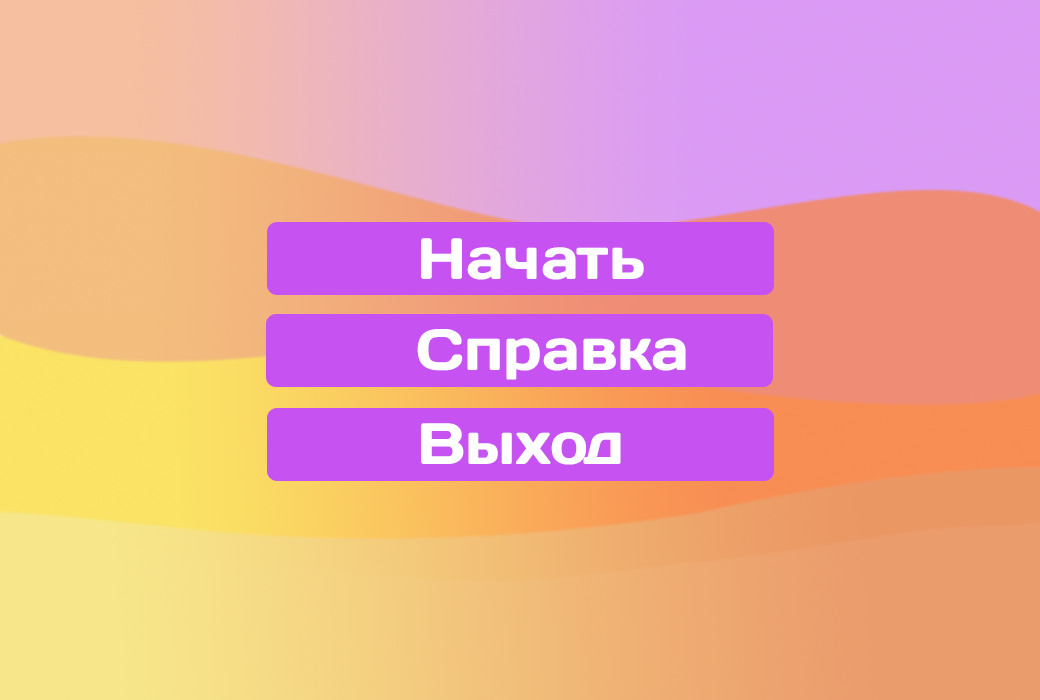
<style>
.page{position:relative;width:1040px;height:700px}
.page>*{position:absolute;margin:0}
.t1{font:58.3px "Days";color:#ffffff}
</style>
<div class="page">
<p class="t1" style="left:421px;top:238px;width:223px;height:42px">Начать</p>
<p class="t1" style="left:417px;top:329px;width:269px;height:51px">Справка</p>
<p class="t1" style="left:421px;top:423px;width:200px;height:42px">Выход</p>
</div>
